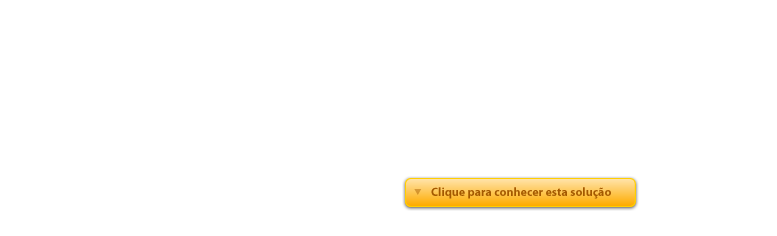
<style>
.page{position:relative;width:777px;height:236px;background:#ffffff}
.page>*{position:absolute;margin:0}
.t1{font:12px "MyriadPro-Bold";color:#a45900}
</style>
<div class="page">
<p class="t1" style="left:431px;top:187px;width:180px;height:12px">Clique para conhecer esta solução</p>
</div>
